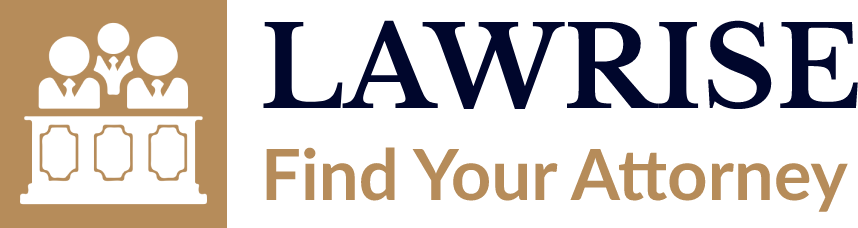
<style>
.page{position:relative;width:858px;height:228px;background:#ffffff}
.page>*{position:absolute;margin:0}
.t1{font:111.8px "LibreBaskerville-Bold";color:#00062c}
.t2{font:70.6px "Lato-Bold";color:#b68c5a}
</style>
<div class="page">
<p class="t1" style="left:263px;top:20px;width:595px;height:89px">LAWRISE</p>
<p class="t2" style="left:266px;top:147px;width:582px;height:65px">Find Your Attorney</p>
</div>
